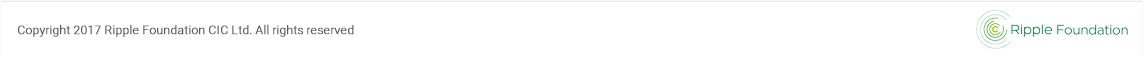
<style>
.page{position:relative;width:1144px;height:57px;background:#ffffff}
.page>*{position:absolute;margin:0}
.t1{font:12px "Roboto-Light";color:#5c5c5c;font-weight:bold}
</style>
<div class="page">
<p class="t1" style="left:18px;top:24px;width:336px;height:13px">Copyright 2017 Ripple Foundation CIC Ltd. All rights reserved</p>
</div>
